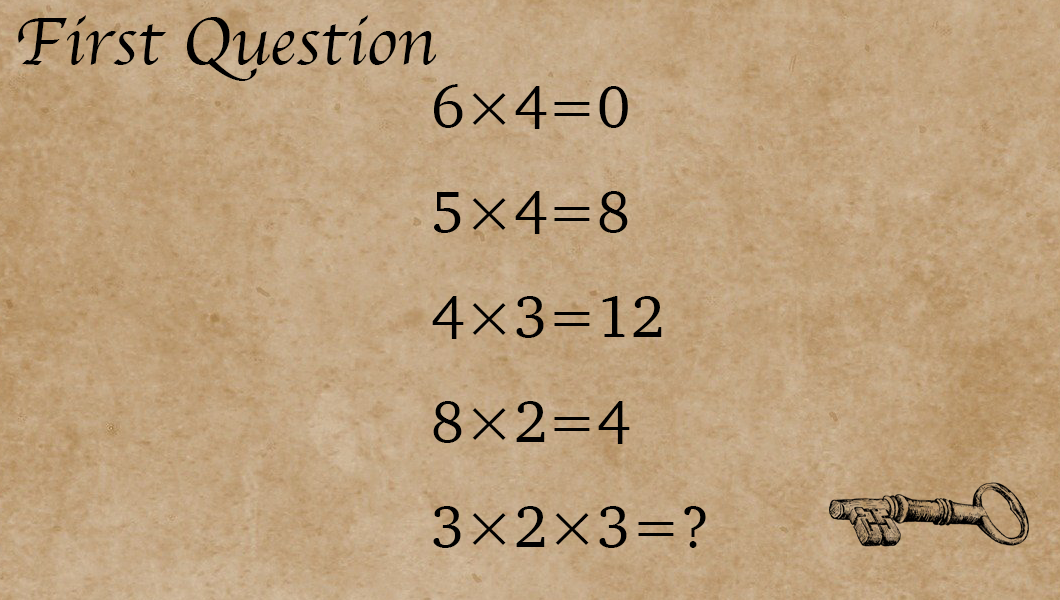
<style>
.page{position:relative;width:1060px;height:600px}
.page>*{position:absolute;margin:0}
.t1{font:70px "Apple-Chancery";color:#000000}
.t2{font:70px "Charter-Roman";color:#000000}
.t3{font:60px "Charter-Roman";color:#000000}
</style>
<div class="page">
<p class="t1" style="left:18px;top:15px;width:419px;height:66px"><span class="t2"><br><br></span>First Question</p>
<p class="t3" style="left:432px;top:84px;width:274px;height:464px">6×4=0<br>5×4=8<br>4×3=12<br>8×2=4<br>3×2×3=?</p>
</div>
